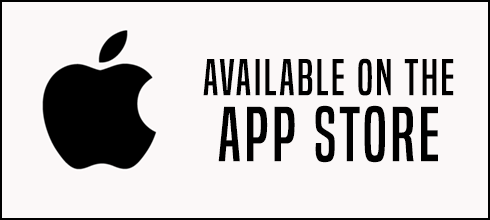
<style>
.page{position:relative;width:490px;height:220px;background:#fbf8f8}
.page>*{position:absolute;margin:0}
.t1{font:48px/66px "BuiltTitlingRg-Regular";letter-spacing:0.05em;color:#000000}
.t2{font:72px/66px "BuiltTitlingRg-Regular";letter-spacing:0.05em;color:#000000}
</style>
<div class="page">
<p class="t1" style="left:203px;top:58px;width:251px;height:105px;text-align:center">available on the<br><span class="t2">App Store</span></p>
</div>
